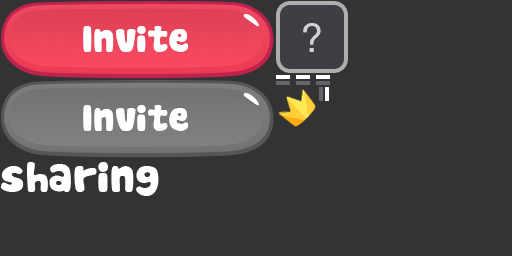
<style>
.page{position:relative;width:512px;height:256px;background:#333333}
.page>*{position:absolute;margin:0}
.t1{font:36px "Cookies";color:#ffffff}
.t2{font:41.9px "Cookies";color:#ffffff}
</style>
<div class="page">
<p class="t1" style="left:83px;top:26px;width:106px;height:26px">Invite</p>
<p class="t1" style="left:83px;top:105px;width:106px;height:26px">Invite</p>
<p class="t2" style="left:1px;top:162px;width:158px;height:34px">sharing</p>
</div>
